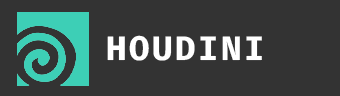
<style>
.page{position:relative;width:340px;height:96px;background:#333333}
.page>*{position:absolute;margin:0}
.t1{font:34px "FiraCode-Bold";letter-spacing:0.075em;color:#ffffff}
</style>
<div class="page">
<p class="t1" style="left:107px;top:35px;width:155px;height:26px">HOUDINI</p>
</div>
